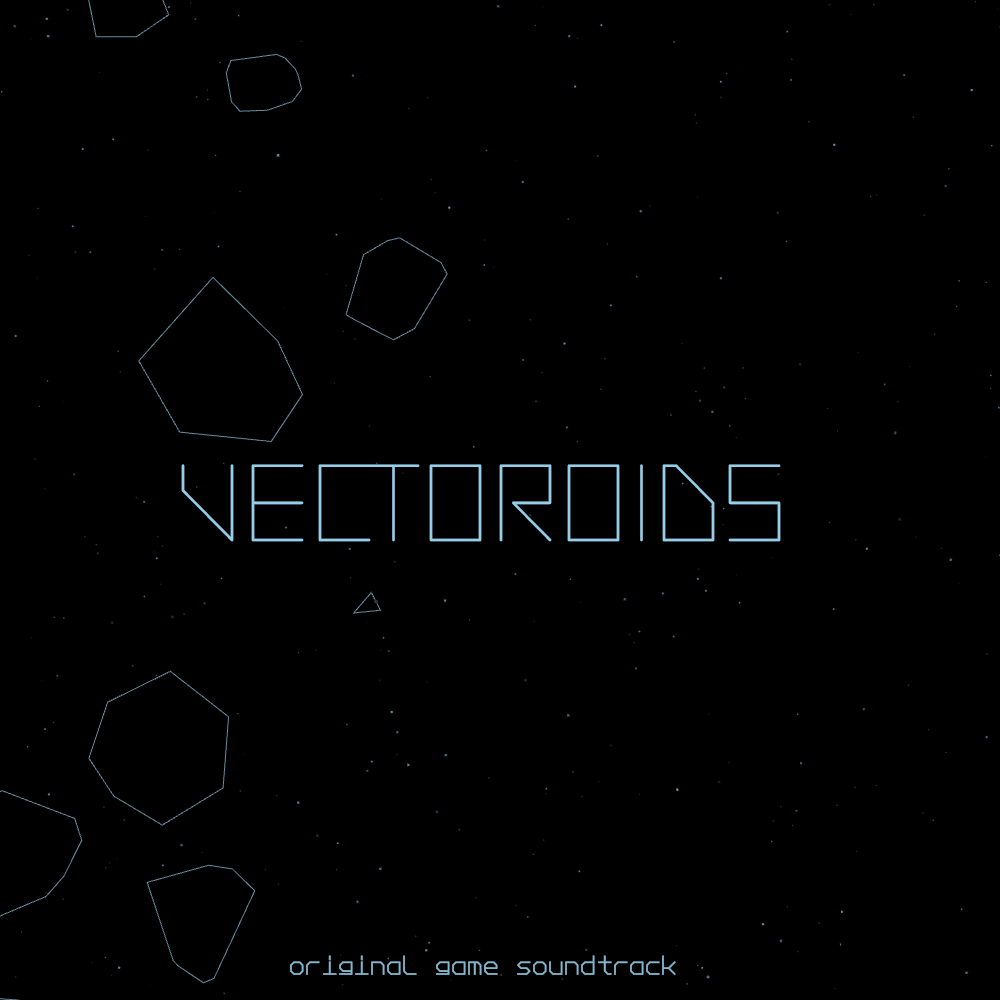
<style>
.page{position:relative;width:1000px;height:1000px;background:#000000}
.page>*{position:absolute;margin:0}
.t1{font:74.2px "TypegridRegular";letter-spacing:0.1em;color:#96cde7}
.t2{font:17.6px "Vectoroid_Headline_MonoRegular";letter-spacing:0.1em;color:#84b5cc}
</style>
<div class="page">
<p class="t1" style="left:181px;top:464px;width:600px;height:78px">VECTOROIDS</p>
<p class="t2" style="left:290px;top:955px;width:386px;height:21px">original game soundtrack</p>
</div>
